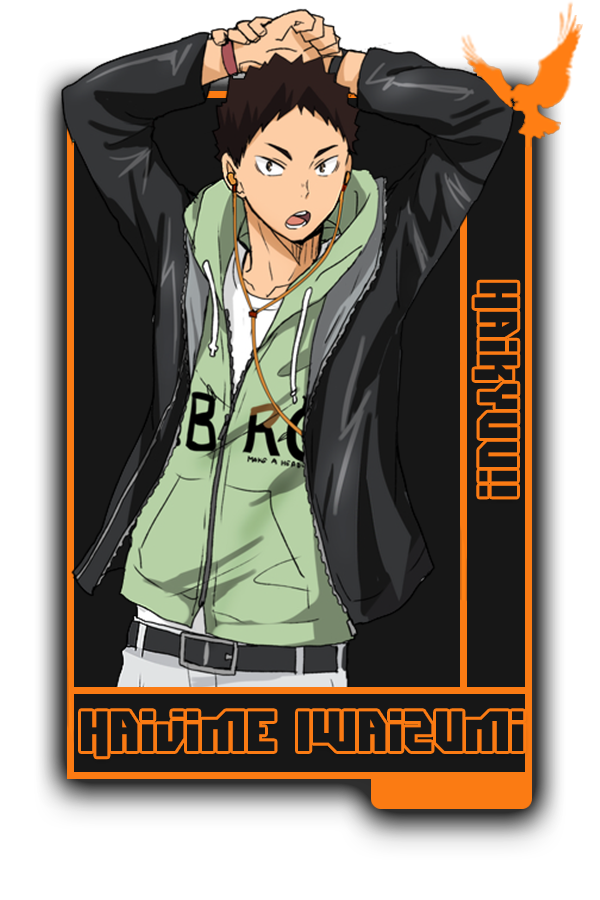
<style>
.page{position:relative;width:600px;height:900px;background:#ffffff}
.page>*{position:absolute;margin:0}
.t1{font:53.7px "Dimitri";color:#171717}
.t2{font:56.5px "Dimitri";color:#171717}
</style>
<div class="page">
<p class="t1" style="left:474px;top:282px;width:44px;height:215px;rotate:90deg">Haikyuu!!</p>
<p class="t2" style="left:81px;top:711px;width:443px;height:46px">Haijime Iwaizumi</p>
</div>
